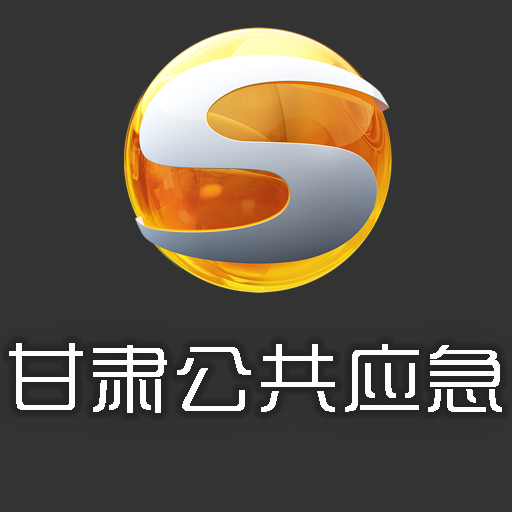
<style>
.page{position:relative;width:512px;height:512px;background:#333333}
.page>*{position:absolute;margin:0}
.t1{font:80px "SJshishang-Regular";letter-spacing:0.02em;color:#fcfdfd;font-weight:bold}
</style>
<div class="page">
<p class="t1" style="left:9px;top:343px;width:493px;height:70px">甘肃公共应急</p>
</div>
